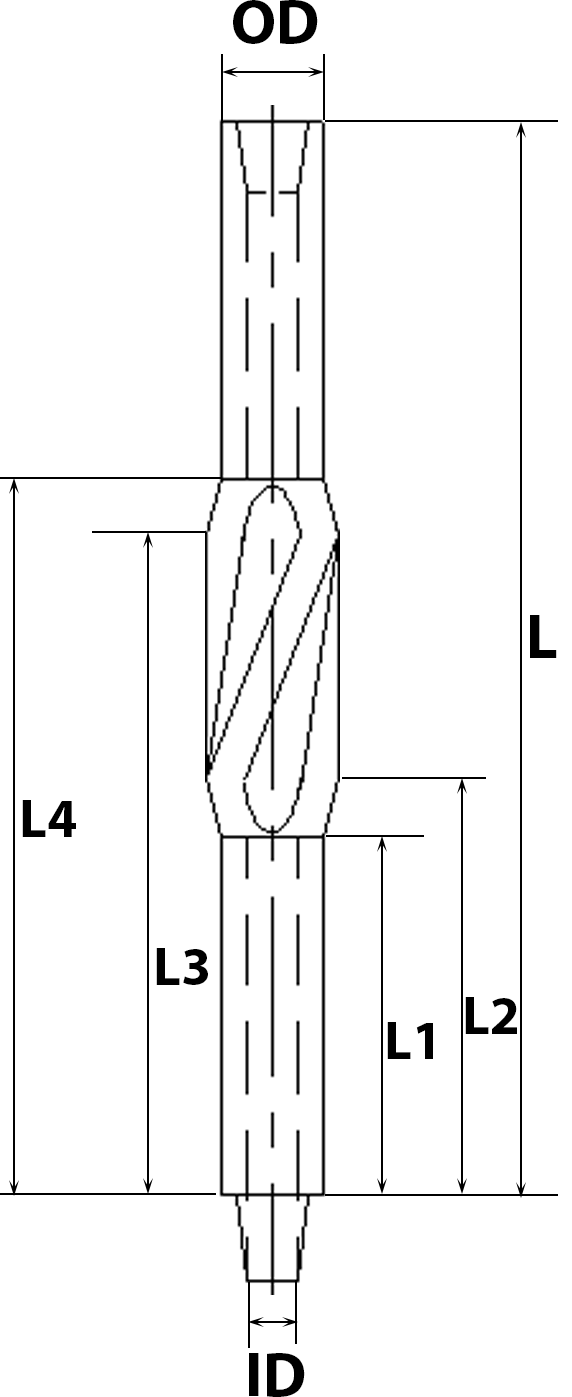
<style>
.page{position:relative;width:572px;height:1397px;background:#ffffff}
.page>*{position:absolute;margin:0}
.t1{font:62.5px "MyriadPro-Bold";color:#000000}
.t2{font:54.2px "MyriadPro-Bold";color:#000000}
</style>
<div class="page">
<p class="t1" style="left:233px;top:0px;width:85px;height:44px">OD</p>
<p class="t1" style="left:530px;top:615px;width:27px;height:43px">L</p>
<p class="t2" style="left:22px;top:800px;width:54px;height:37px">L4</p>
<p class="t2" style="left:156px;top:948px;width:52px;height:37px">L3</p>
<p class="t2" style="left:465px;top:997px;width:52px;height:37px">L2</p>
<p class="t2" style="left:387px;top:1022px;width:46px;height:37px">L1</p>
<p class="t1" style="left:249px;top:1353px;width:56px;height:44px">ID</p>
</div>
